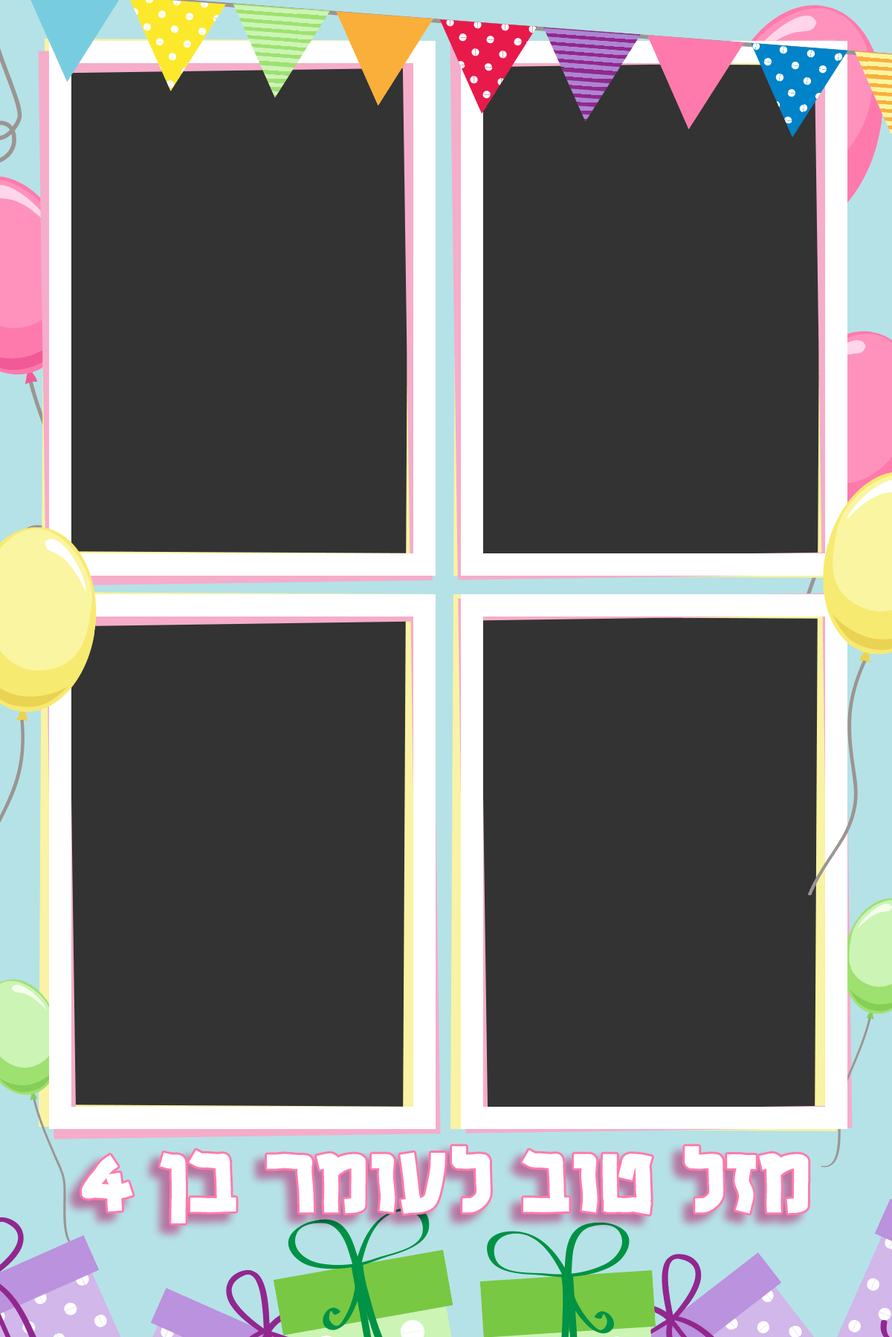
<style>
.page{position:relative;width:892px;height:1337px;background:#333333}
.page>*{position:absolute;margin:0}
.t1{font:92.9px "CampingBold";letter-spacing:0.01em;color:#ffffff}
</style>
<div class="page">
<p class="t1" style="left:82px;top:1146px;width:726px;height:78px">4 ןב רמועל בוט לזמ</p>
</div>
